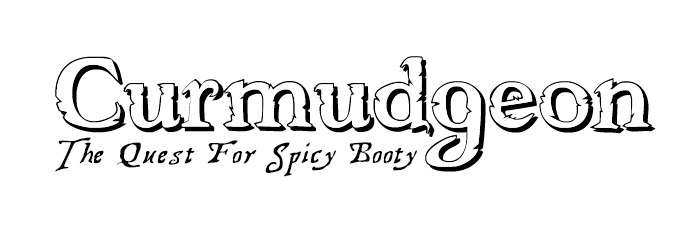
<style>
.page{position:relative;width:689px;height:227px;background:#ffffff}
.page>*{position:absolute;margin:0}
.t1{font:142.8px "FreebooterShadow";color:#000000}
.t2{font:38.7px "TreasureMapDeadhand";color:#000000}
</style>
<div class="page">
<p class="t1" style="left:55px;top:56px;width:601px;height:116px">Curmudgeon</p>
<p class="t2" style="left:54px;top:137px;width:363px;height:40px">The Quest For Spicy Booty</p>
</div>
